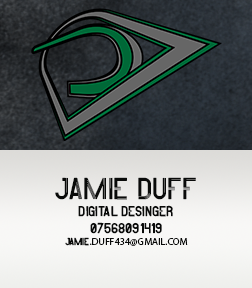
<style>
.page{position:relative;width:252px;height:288px}
.page>*{position:absolute;margin:0}
.t1{font:14px "MinbusRegular";color:#090a09}
.t2{font:30px "MinbusRegular";color:#090a09}
.t3{font:10px "MinbusRegular";color:#090a09}
.t4{font:10px "MyriadPro-Regular";color:#090a09}
</style>
<div class="page">
<p class="t1" style="left:55px;top:177px;width:141px;height:69px;text-align:center"><span class="t2">Jamie Duff<br></span>dIGITAL dESINGER<br>07568091419<br><span class="t3">jAMIE</span><span class="t4">.DUFF434@GMAIL.COM</span></p>
</div>
